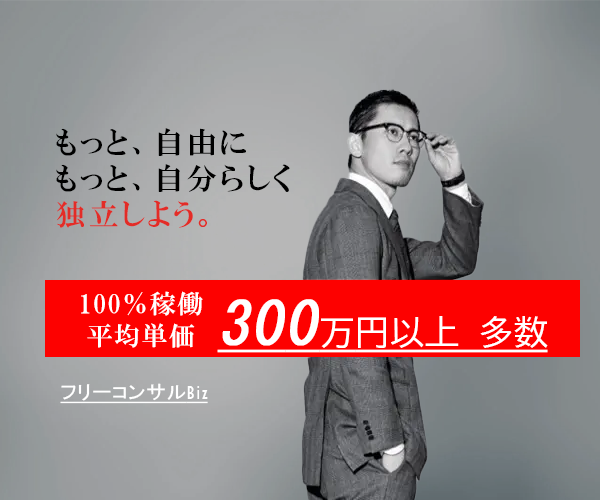
<style>
.page{position:relative;width:600px;height:500px}
.page>*{position:absolute;margin:0}
.t1{font:30px/36px "HGPMinchoE";letter-spacing:0.1em;color:#000000}
.t2{font:30px/36px "HGPMinchoE";letter-spacing:0.1em;color:#e32c27}
.t3{font:26.3px/31.5px "HGSMinchoE";letter-spacing:0.04em;color:#ffffff}
.t4{font:33.8px "BIZ-UDGothic";letter-spacing:0.04em;color:#ffffff;text-decoration:underline}
.t5{font:59.6px "MS-Gothic";letter-spacing:0.04em;color:#ffffff;font-weight:bold;font-style:italic;text-decoration:underline}
.t6{font:59.6px "MS-Gothic";letter-spacing:0.05em;color:#ffffff;font-weight:bold;font-style:italic;text-decoration:underline}
.t7{font:33.8px "BIZ-UDGothic";letter-spacing:0.05em;color:#ffffff;text-decoration:underline}
.t8{font:20px "MS-PGothic";letter-spacing:0.02em;color:#ffffff;text-decoration:underline}
.t9{font:20px "GillSansMT-Condensed";letter-spacing:0.1em;color:#ffffff;text-decoration:underline}
</style>
<div class="page">
<p class="t1" style="left:56px;top:128px;width:234px;height:100px">もっと、自由に<br>もっと、自分らしく<br><span class="t2">独立しよう。</span></p>
<p class="t3" style="left:81px;top:291px;width:122px;height:57px;text-align:center">100％稼働<br>平均単価</p>
<p class="t4" style="left:217px;top:299px;width:331px;height:54px"><span class="t5">30</span><span class="t6">0</span><span class="t7">万</span>円以上 多数</p>
<p class="t8" style="left:60px;top:383px;width:148px;height:21px">フリーコンサル<span class="t9">Biz</span></p>
</div>
